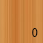
<style>
.page{position:relative;width:43px;height:43px}
.page>*{position:absolute;margin:0}
.t1{font:12px "TimesNewRomanPSMT";color:#0c0c0b}
</style>
<div class="page">
<p class="t1" style="left:32px;top:28px;width:6px;height:9px">0</p>
</div>
